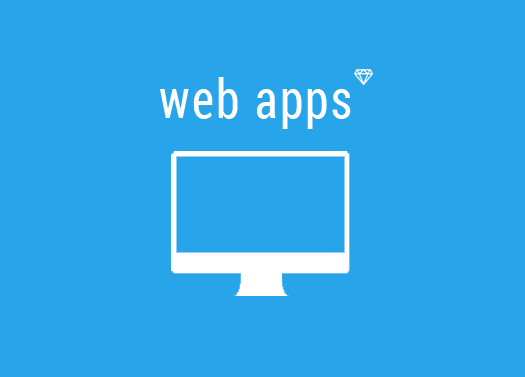
<style>
.page{position:relative;width:525px;height:377px;background:#28a4ea}
.page>*{position:absolute;margin:0}
.t1{font:54px "RobotoCondensed-Regular";letter-spacing:0.05em;color:#ffffff;scale:0.89 1}
</style>
<div class="page">
<p class="t1" style="left:160px;top:77px;width:191px;height:52px">web apps</p>
</div>
